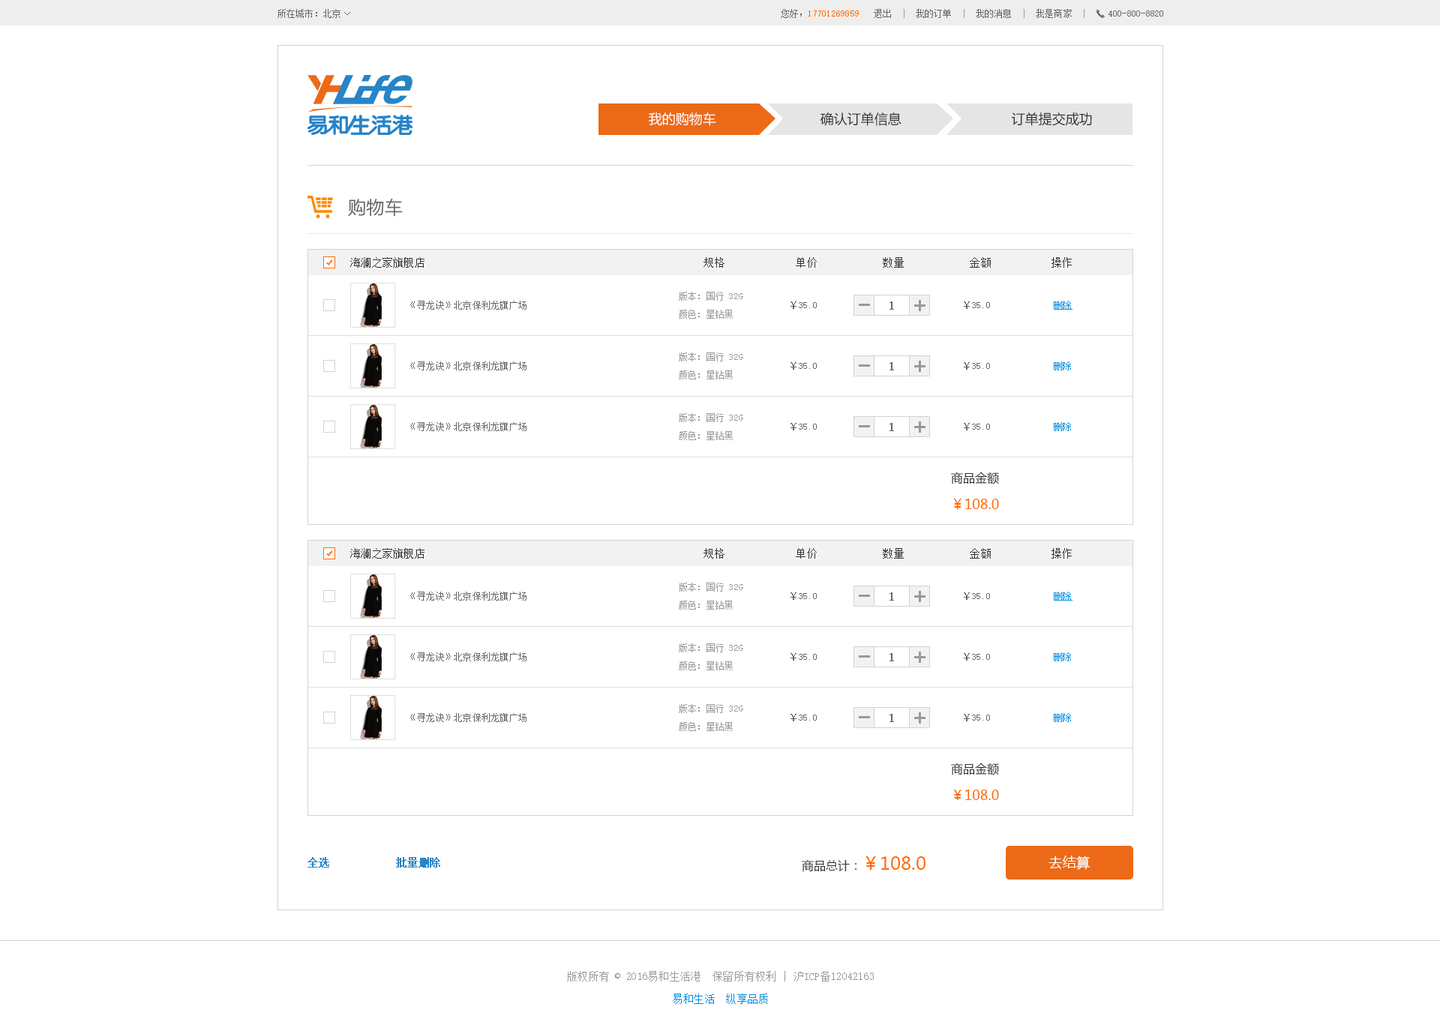
<style>
.page{position:relative;width:1440px;height:1034px;background:#ffffff}
.page>*{position:absolute;margin:0}
.t1{font:9px "SimSun";letter-spacing:0.02em;color:#666666}
.t2{font:9px "SimSun";letter-spacing:0.02em;color:#ff6c00}
.t3{font:9px "SimSun";letter-spacing:0.02em;color:#999999}
.t4{font:13.5px "MicrosoftYaHei";color:#fffcfc}
.t5{font:13.5px "MicrosoftYaHei";color:#333333}
.t6{font:18px "MicrosoftYaHei";letter-spacing:0.02em;color:#666666}
.t7{font:10.5px "SimSun";letter-spacing:0.02em;color:#333333}
.t8{font:9px/18px "SimSun";letter-spacing:0.02em;color:#999999}
.t9{font:12px "SimSun";color:#666666;font-weight:bold}
.t10{font:9px "SimSun";letter-spacing:0.02em;color:#008de1;text-decoration:underline}
.t11{font:9px "SimSun";letter-spacing:0.02em;color:#008de1}
.t12{font:13.5px/27px "MicrosoftYaHei";color:#ff6c00}
.t13{font:12px/27px "MicrosoftYaHei";color:#333333}
.t14{font:10.5px "SimSun";color:#2684c7;font-weight:bold}
.t15{font:18px "MicrosoftYaHei";color:#ff6c00}
.t16{font:12px "MicrosoftYaHei";color:#333333}
.t17{font:13.5px "MicrosoftYaHei";letter-spacing:0.02em;color:#ffffff}
.t18{font:10.5px/22.5px "SimSun";letter-spacing:0.02em;color:#999999}
.t19{font:10.5px/22.5px "SimSun";letter-spacing:0.02em;color:#008de1}
</style>
<div class="page">
<p class="t1" style="left:278px;top:9px;width:62px;height:9px">所在城市：北京</p>
<p class="t1" style="left:344px;top:12px;width:6px;height:3px">&gt;</p>
<p class="t2" style="left:781px;top:9px;width:303px;height:9px"><span class="t1">您好，</span>17701269859<span class="t1">   退出</span><span class="t3">  |  </span><span class="t1">我的订单</span><span class="t3">  |  </span><span class="t1">我的消息</span><span class="t3">  |  </span><span class="t1">我是商家</span><span class="t3">  |</span></p>
<p class="t1" style="left:1108px;top:10px;width:55px;height:6px">400-800-8820</p>
<p class="t4" style="left:649px;top:112px;width:67px;height:14px">我的购物车</p>
<p class="t5" style="left:820px;top:112px;width:82px;height:14px">确认订单信息</p>
<p class="t5" style="left:1011px;top:112px;width:81px;height:14px">订单提交成功</p>
<p class="t6" style="left:348px;top:198px;width:55px;height:19px">购物车</p>
<p class="t7" style="left:350px;top:257px;width:722px;height:11px">海澜之家旗舰店                                                   规格             单价            数量            金额           操作</p>
<p class="t8" style="left:679px;top:292px;width:64px;height:27px">版本：国行 32G <br>颜色：星钻黑</p>
<p class="t1" style="left:410px;top:301px;width:116px;height:9px">《寻龙诀》北京保利龙旗广场</p>
<p class="t1" style="left:790px;top:302px;width:27px;height:7px">￥35.0</p>
<p class="t9" style="left:890px;top:302px;width:4px;height:8px">1</p>
<p class="t1" style="left:964px;top:302px;width:26px;height:7px">￥35.0</p>
<p class="t10" style="left:1054px;top:301px;width:18px;height:9px">删除</p>
<p class="t8" style="left:679px;top:352px;width:64px;height:28px">版本：国行 32G <br>颜色：星钻黑</p>
<p class="t1" style="left:410px;top:362px;width:116px;height:8px">《寻龙诀》北京保利龙旗广场</p>
<p class="t1" style="left:790px;top:362px;width:27px;height:8px">￥35.0</p>
<p class="t9" style="left:890px;top:362px;width:4px;height:8px">1</p>
<p class="t1" style="left:964px;top:362px;width:26px;height:8px">￥35.0</p>
<p class="t11" style="left:1054px;top:362px;width:17px;height:8px">删除</p>
<p class="t8" style="left:679px;top:413px;width:64px;height:27px">版本：国行 32G <br>颜色：星钻黑</p>
<p class="t1" style="left:410px;top:422px;width:116px;height:9px">《寻龙诀》北京保利龙旗广场</p>
<p class="t1" style="left:790px;top:423px;width:27px;height:7px">￥35.0</p>
<p class="t9" style="left:890px;top:423px;width:4px;height:8px">1</p>
<p class="t1" style="left:964px;top:423px;width:26px;height:7px">￥35.0</p>
<p class="t11" style="left:1054px;top:422px;width:17px;height:9px">删除</p>
<p class="t12" style="left:951px;top:472px;width:48px;height:37px;text-align:center"><span class="t13">商品金额<br></span>￥108.0</p>
<p class="t7" style="left:350px;top:548px;width:722px;height:11px">海澜之家旗舰店                                                   规格             单价            数量            金额           操作</p>
<p class="t1" style="left:410px;top:592px;width:116px;height:9px">《寻龙诀》北京保利龙旗广场</p>
<p class="t8" style="left:679px;top:583px;width:64px;height:27px">版本：国行 32G <br>颜色：星钻黑</p>
<p class="t1" style="left:790px;top:592px;width:27px;height:8px">￥35.0</p>
<p class="t9" style="left:890px;top:592px;width:4px;height:9px">1</p>
<p class="t1" style="left:964px;top:592px;width:26px;height:8px">￥35.0</p>
<p class="t10" style="left:1054px;top:592px;width:18px;height:9px">删除</p>
<p class="t1" style="left:410px;top:652px;width:116px;height:10px">《寻龙诀》北京保利龙旗广场</p>
<p class="t8" style="left:679px;top:644px;width:64px;height:26px">版本：国行 32G <br>颜色：星钻黑</p>
<p class="t1" style="left:790px;top:653px;width:27px;height:8px">￥35.0</p>
<p class="t9" style="left:890px;top:653px;width:4px;height:9px">1</p>
<p class="t1" style="left:964px;top:653px;width:26px;height:8px">￥35.0</p>
<p class="t11" style="left:1054px;top:652px;width:17px;height:10px">删除</p>
<p class="t1" style="left:410px;top:713px;width:116px;height:9px">《寻龙诀》北京保利龙旗广场</p>
<p class="t8" style="left:679px;top:704px;width:64px;height:27px">版本：国行 32G <br>颜色：星钻黑</p>
<p class="t11" style="left:1054px;top:713px;width:17px;height:9px">删除</p>
<p class="t1" style="left:790px;top:714px;width:27px;height:8px">￥35.0</p>
<p class="t9" style="left:890px;top:714px;width:4px;height:8px">1</p>
<p class="t1" style="left:964px;top:714px;width:26px;height:8px">￥35.0</p>
<p class="t12" style="left:951px;top:763px;width:48px;height:37px;text-align:center"><span class="t13">商品金额<br></span>￥108.0</p>
<p class="t14" style="left:308px;top:857px;width:132px;height:11px">全选           批量删除</p>
<p class="t15" style="left:802px;top:856px;width:124px;height:16px"><span class="t16">商品总计：</span>￥108.0</p>
<p class="t17" style="left:1048px;top:856px;width:42px;height:14px">去结算</p>
<p class="t18" style="left:567px;top:971px;width:307px;height:33px;text-align:center">版权所有 © 2016易和生活港  保留所有权利 | 沪ICP备12042163<br><span class="t19">易和生活  纵享品质</span></p>
</div>
